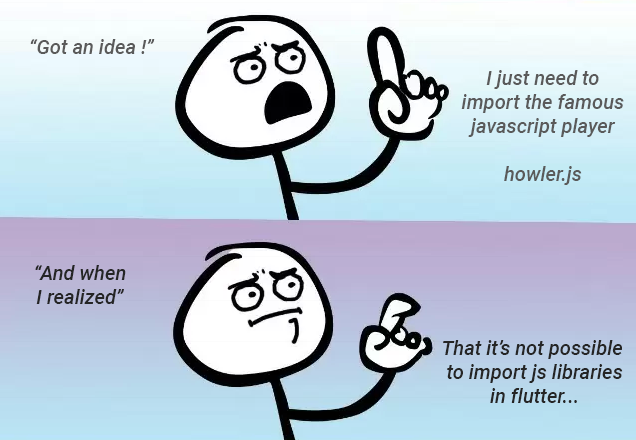
<style>
.page{position:relative;width:636px;height:440px}
.page>*{position:absolute;margin:0}
.t1{font:20px "Roboto-MediumItalic";color:#5a5a5a}
.t2{font:20px "Roboto-MediumItalic";color:#252525}
</style>
<div class="page">
<p class="t1" style="left:30px;top:39px;width:125px;height:15px">“Got an idea !”</p>
<p class="t1" style="left:461px;top:70px;width:163px;height:115px;text-align:center">I just need to<br>import the famous<br>javascript player<br><br>howler.js</p>
<p class="t2" style="left:35px;top:265px;width:91px;height:39px;text-align:center">“And when<br>I realized”</p>
<p class="t2" style="left:443px;top:340px;width:180px;height:63px;text-align:center">That it’s not possible <br>to import js libraries<br>in flutter...</p>
</div>
